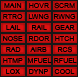
<style>
.page{position:relative;width:78px;height:77px;background:#171717}
.page>*{position:absolute;margin:0}
.t1{font:10px "ArialMT";color:#000000;font-variant:small-caps}
.t2{font:10px "ArialMT";color:#010101;font-variant:small-caps}
</style>
<div class="page">
<p class="t1" style="left:4px;top:3px;width:18px;height:5px">main</p>
<p class="t1" style="left:29px;top:3px;width:21px;height:5px">hovr</p>
<p class="t1" style="left:54px;top:2px;width:21px;height:7px">scrm</p>
<p class="t1" style="left:3px;top:14px;width:20px;height:5px">rtro</p>
<p class="t1" style="left:28px;top:14px;width:21px;height:5px">lwng</p>
<p class="t1" style="left:54px;top:14px;width:22px;height:5px">rwng</p>
<p class="t1" style="left:6px;top:25px;width:15px;height:5px">lail</p>
<p class="t1" style="left:32px;top:25px;width:15px;height:5px">rail</p>
<p class="t1" style="left:55px;top:25px;width:20px;height:5px">gear</p>
<p class="t1" style="left:3px;top:35px;width:20px;height:7px">nose</p>
<p class="t1" style="left:29px;top:36px;width:21px;height:5px">rdor</p>
<p class="t1" style="left:55px;top:36px;width:19px;height:5px">htch</p>
<p class="t1" style="left:6px;top:47px;width:15px;height:5px">rad</p>
<p class="t1" style="left:30px;top:47px;width:17px;height:5px">airb</p>
<p class="t1" style="left:58px;top:46px;width:14px;height:7px">rcs</p>
<p class="t1" style="left:3px;top:58px;width:20px;height:5px">htmp</p>
<p class="t1" style="left:27px;top:58px;width:25px;height:5px">mfuel</p>
<p class="t1" style="left:54px;top:58px;width:23px;height:5px">rfuel</p>
<p class="t1" style="left:6px;top:69px;width:14px;height:5px">lox</p>
<p class="t1" style="left:29px;top:69px;width:19px;height:5px">dynp</p>
<p class="t2" style="left:54px;top:69px;width:21px;height:5px">cool</p>
</div>
